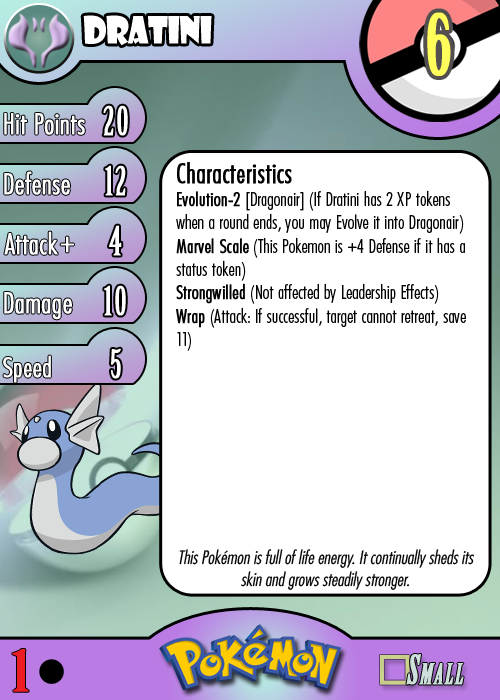
<style>
.page{position:relative;width:500px;height:700px;background:#ffffff}
.page>*{position:absolute;margin:0}
.t1{font:36.7px "ShowcardGothic-Reg";letter-spacing:-0.025em;color:#ffffff;scale:0.91 1}
.t2{font:83.3px "BirchStd";letter-spacing:0.025em;color:#fffd59;font-weight:bold}
.t3{font:27.8px "Futura-CondensedLight";color:#ffffff;font-weight:bold}
.t4{font:38.9px "BirchStd";letter-spacing:0.035em;color:#ffffff;font-weight:bold}
.t5{font:19.4px "FuturaCondensedBQ-Light";color:#010101}
.t6{font:27.8px "FuturaCondensedBQ-Light";color:#010101;font-weight:bold}
.t7{font:19.4px "FuturaCondensedBQ-Light";color:#010101;font-weight:bold}
.t8{font:30.6px "Futura-CondensedLight";color:#ffffff;font-weight:bold}
.t9{font:27.8px "FuturaCondensedBQ-Light";color:#ffffff;font-weight:bold}
.t10{font:18.1px "Futura-CondensedLight";color:#010101;font-style:italic}
.t11{font:55.6px "BirchStd";color:#ed1c24;font-weight:bold;scale:1.5 1}
</style>
<div class="page">
<p class="t1" style="left:83px;top:15px;width:129px;height:31px">dratini</p>
<p class="t2" style="left:427px;top:12px;width:24px;height:64px">6</p>
<p class="t3" style="left:4px;top:113px;width:81px;height:22px">Hit Points</p>
<p class="t4" style="left:103px;top:105px;width:25px;height:31px">20</p>
<p class="t3" style="left:4px;top:171px;width:66px;height:24px">Defense</p>
<p class="t4" style="left:105px;top:165px;width:21px;height:31px">12</p>
<p class="t5" style="left:176px;top:162px;width:290px;height:189px"><span class="t6">Characteristics<br></span><span class="t7">Evolution-2 </span>[Dragonair] (If Dratini has 2 XP tokens when a round ends, you may Evolve it into Dragonair)<br><span class="t7">Marvel Scale</span> (This Pokemon is +4 Defense if it has a status token)<br><span class="t7">Strongwilled</span> (Not affected by Leadership Effects)<br><span class="t7">Wrap</span> (Attack: If successful, target cannot retreat, save 11)</p>
<p class="t3" style="left:4px;top:231px;width:54px;height:24px">Attack</p>
<p class="t4" style="left:109px;top:225px;width:13px;height:31px">4</p>
<p class="t8" style="left:60px;top:236px;width:14px;height:17px">+</p>
<p class="t3" style="left:4px;top:292px;width:68px;height:28px">Damage</p>
<p class="t4" style="left:104px;top:285px;width:22px;height:31px">10</p>
<p class="t4" style="left:111px;top:348px;width:10px;height:31px">5</p>
<p class="t9" style="left:3px;top:355px;width:48px;height:28px">Speed</p>
<p class="t10" style="left:179px;top:549px;width:295px;height:41px;text-align:center">This Pokémon is full of life energy. It continually sheds its skin and grows steadily stronger.</p>
<p class="t11" style="left:12px;top:649px;width:17px;height:43px">1</p>
</div>
